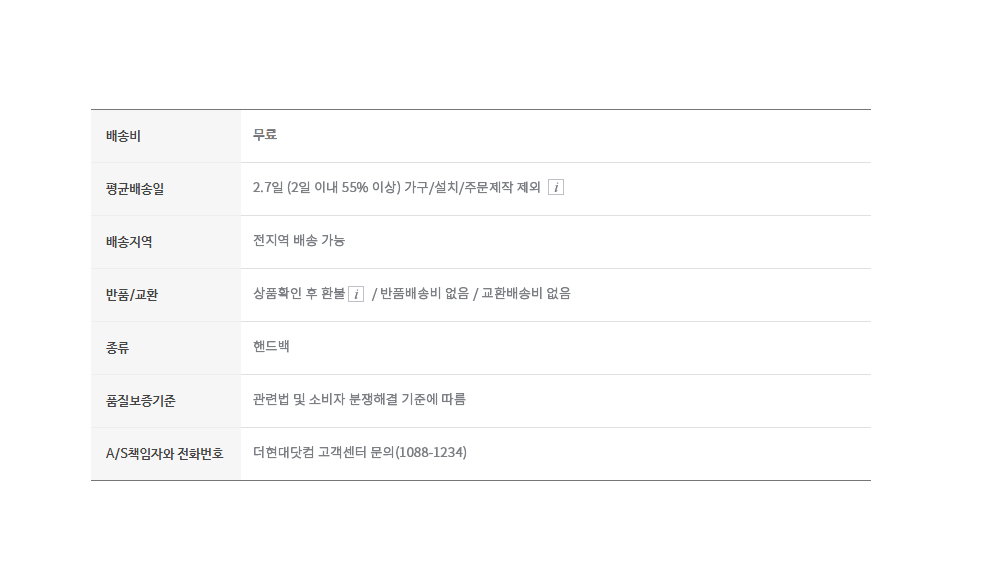
<style>
.page{position:relative;width:994px;height:584px;background:#ffffff}
.page>*{position:absolute;margin:0}
.t1{font:13px/53px "NotoSansKR-Light";color:#7e7f85;font-weight:bold}
.t2{font:15px "TimesNewRomanPS-ItalicMT";color:#7e7f85;font-weight:bold}
</style>
<div class="page">
<p class="t1" style="left:253px;top:129px;width:318px;height:331px">무료<br>2.7일 (2일 이내 55% 이상) 가구/설치/주문제작 제외<br>전지역 배송 가능<br>상품확인 후 환불        / 반품배송비 없음 / 교환배송비 없음<br>핸드백<br>관련법 및 소비자 분쟁해결 기준에 따름<br>더현대닷컴 고객센터 문의(1088-1234)</p>
<p class="t2" style="left:554px;top:182px;width:5px;height:10px">i</p>
<p class="t2" style="left:354px;top:289px;width:5px;height:10px">i</p>
</div>
